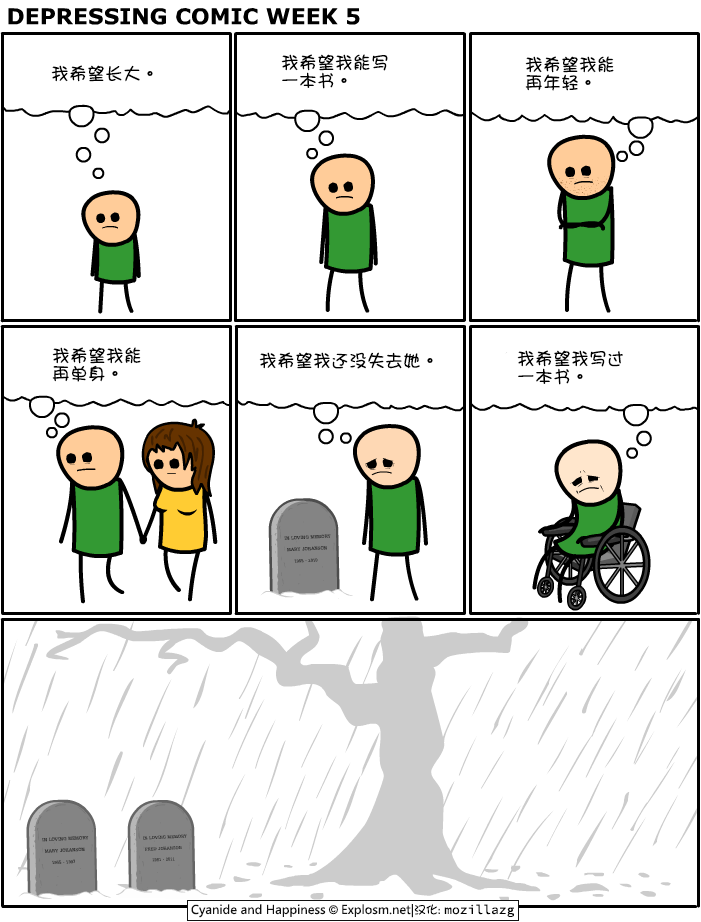
<style>
.page{position:relative;width:701px;height:922px;background:#ffffff}
.page>*{position:absolute;margin:0}
.t1{font:18px/18px "DFGirl";color:#000000}
.t2{font:18px "DFGirl";color:#000000}
</style>
<div class="page">
<p class="t1" style="left:281px;top:54px;width:107px;height:35px">我希望我能写<br>一本书。</p>
<p class="t2" style="left:51px;top:65px;width:102px;height:17px">我希望长大。</p>
<p class="t1" style="left:525px;top:56px;width:89px;height:35px">我希望我能<br>再年轻。</p>
<p class="t1" style="left:52px;top:347px;width:89px;height:35px">我希望我能<br>再单身。</p>
<p class="t2" style="left:259px;top:352px;width:174px;height:17px">我希望我还没失去她。</p>
<p class="t1" style="left:517px;top:350px;width:106px;height:35px">我希望我写过<br>一本书。</p>
</div>
